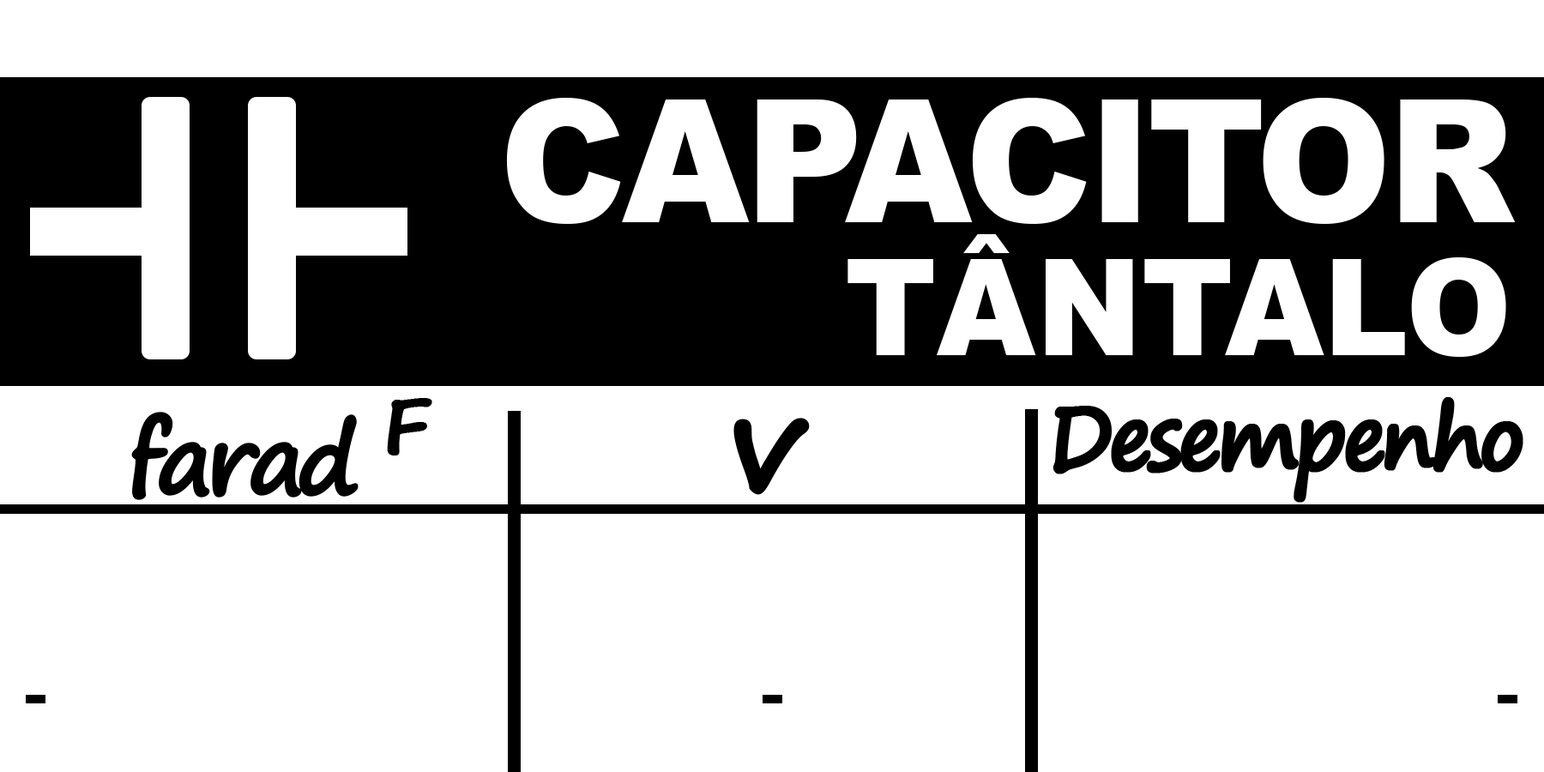
<style>
.page{position:relative;width:1544px;height:772px;background:#ffffff}
.page>*{position:absolute;margin:0}
.t1{font:171.6px "Arial-Black";letter-spacing:-0.025em;color:#ffffff;scale:0.95 1}
.t2{font:133.5px "Arial-Black";color:#ffffff;scale:0.95 1}
.t3{font:96.5px "SegoePrint-Bold";letter-spacing:-0.1em;color:#000000;font-weight:bold}
.t4{font:100.8px "SegoePrint-Bold";letter-spacing:-0.1em;color:#000000;font-weight:bold}
.t5{font:129.8px "SegoePrint-Bold";letter-spacing:-0.15em;color:#000000;font-weight:bold}
.t6{font:89.9px "SegoePrint-Bold";letter-spacing:-0.075em;color:#000000;font-weight:bold;scale:0.91 1}
.t7{font:132.4px "SegoePrint-Bold";letter-spacing:-0.15em;color:#000000;font-weight:bold}
</style>
<div class="page">
<p class="t1" style="left:506px;top:98px;width:1010px;height:126px">CAPACITOR</p>
<p class="t2" style="left:848px;top:234px;width:659px;height:123px">TÂNTALO</p>
<p class="t3" style="left:131px;top:398px;width:301px;height:102px"><span class="t4"> </span>farad <span class="t5">F</span></p>
<p class="t6" style="left:1053px;top:397px;width:471px;height:106px">Desempenho</p>
<p class="t7" style="left:734px;top:418px;width:76px;height:77px">v</p>
</div>
